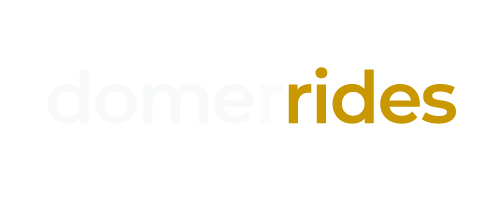
<style>
.page{position:relative;width:504px;height:216px;background:#ffffff}
.page>*{position:absolute;margin:0}
.t1{font:72px "Montserrat-SemiBold";letter-spacing:-0.025em;color:#c99700}
.t2{font:72px "Montserrat-SemiBold";letter-spacing:-0.025em;color:#f7f9fa}
.t3{font:72px "Montserrat-SemiBold";letter-spacing:-0.025em;color:#fbfbf9}
</style>
<div class="page">
<p class="t1" style="left:47px;top:67px;width:409px;height:57px"><span class="t2">dome</span><span class="t3">r</span>rides</p>
</div>
